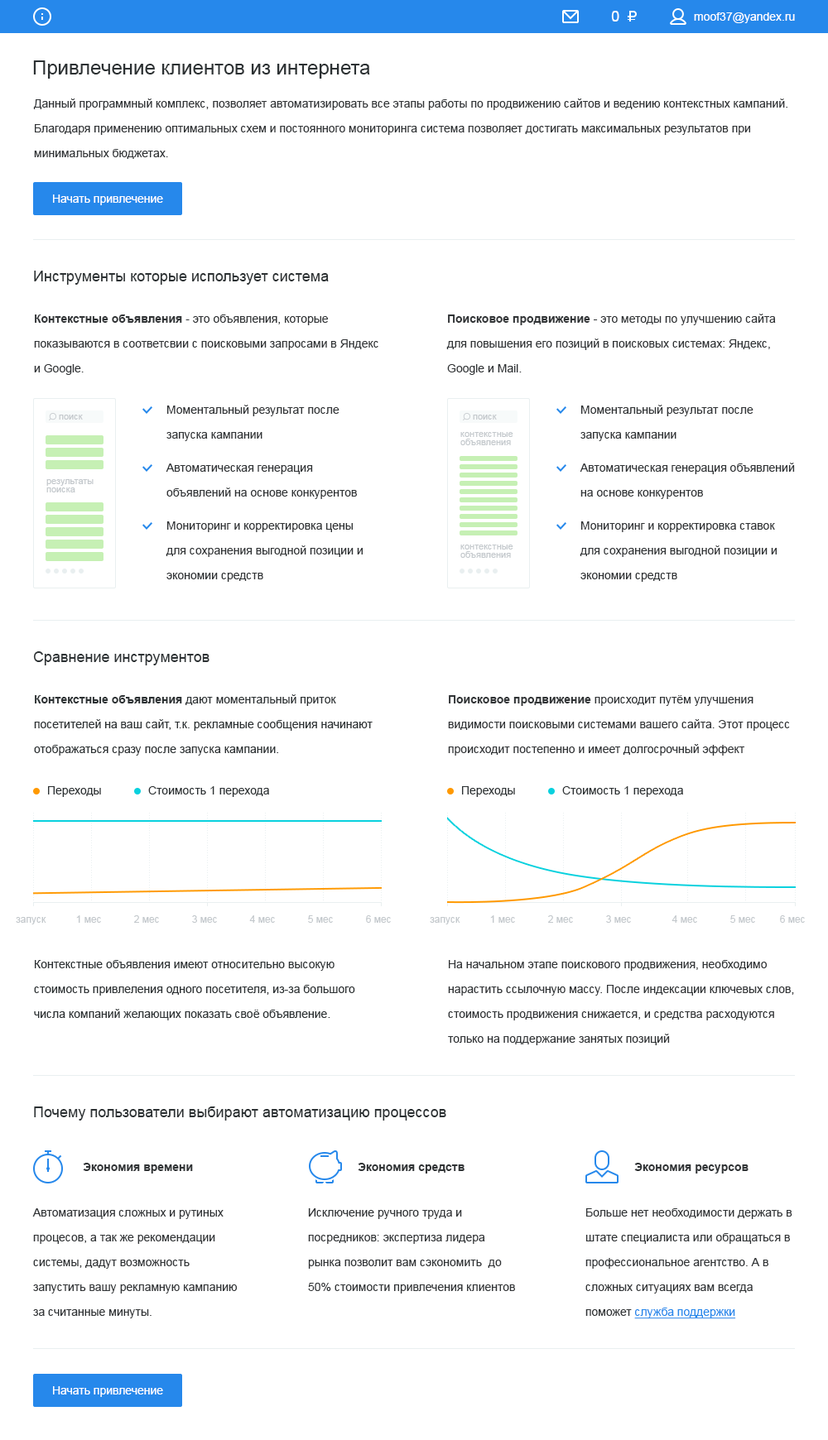
<style>
.page{position:relative;width:828px;height:1440px;background:#ffffff}
.page>*{position:absolute;margin:0}
.t1{font:14.9px "ArialMT";color:#ffffff}
.t2{font:11.6px "ArialMT";color:#ffffff}
.t3{font:19.9px "ArialMT";color:#2c3133}
.t4{font:11.6px/24.8px "ArialMT";color:#313436}
.t5{font:14.9px "ArialMT";color:#2c3133}
.t6{font:11.6px/24.8px "Arial-BoldMT";color:#313436}
.t7{font:9.1px "ArialMT";color:#c3c8cc}
.t8{font:9.1px/8.3px "ArialMT";color:#c3c8cc}
.t9{font:11.6px/24.8px "ArialMT";color:#2c3133}
.t10{font:11.6px/24.8px "Arial-BoldMT";color:#2c3133}
.t11{font:11.6px "ArialMT";color:#2c3133}
.t12{font:9.9px "ArialMT";color:#c3c8cc}
.t13{font:11.6px "Arial-BoldMT";color:#313436}
.t14{font:11.6px/24.8px "ArialMT";color:#2688eb;text-decoration:underline}
</style>
<div class="page">
<p class="t1" style="left:611px;top:11px;width:8px;height:11px">0</p>
<p class="t2" style="left:694px;top:12px;width:101px;height:11px">moof37@yandex.ru</p>
<p class="t3" style="left:33px;top:60px;width:337px;height:19px">Привлечение клиентов из интернета</p>
<p class="t4" style="left:33px;top:99px;width:754px;height:60px">Данный программный комплекс, позволяет автоматизировать все этапы работы по продвижению сайтов и ведению контекстных кампаний.<br>Благодаря применению оптимальных схем и постоянного мониторинга система позволяет достигать максимальных результатов при <br>минимальных бюджетах.</p>
<p class="t2" style="left:53px;top:195px;width:110px;height:10px">Начать привлечение</p>
<p class="t5" style="left:34px;top:271px;width:295px;height:14px">Инструменты которые использует система</p>
<p class="t4" style="left:34px;top:315px;width:344px;height:60px"><span class="t6">Контекстные объявления</span> - это объявления, которые <br>показываются в соответсвии с поисковыми запросами в Яндекс и Google.</p>
<p class="t4" style="left:446px;top:314px;width:330px;height:61px"><span class="t6">Поисковое продвижение</span> - это методы по улучшению сайта для повышения его позиций в поисковых системах: Яндекс, Google и Mail.</p>
<p class="t4" style="left:166px;top:405px;width:173px;height:36px">Моментальный результат после запуска кампании</p>
<p class="t4" style="left:580px;top:405px;width:173px;height:36px">Моментальный результат после <br>запуска кампании</p>
<p class="t7" style="left:59px;top:415px;width:24px;height:5px">поиск</p>
<p class="t7" style="left:473px;top:415px;width:24px;height:5px">поиск</p>
<p class="t8" style="left:460px;top:432px;width:53px;height:13px">контекстные <br>объявления</p>
<p class="t4" style="left:166px;top:464px;width:191px;height:35px">Автоматическая генерация <br>объявлений на основе конкурентов</p>
<p class="t4" style="left:579px;top:463px;width:216px;height:36px">Автоматическая генерация объявлений на основе конкурентов</p>
<p class="t8" style="left:46px;top:479px;width:48px;height:14px">результаты <br>поиска</p>
<p class="t4" style="left:166px;top:522px;width:197px;height:60px">Мониторинг и корректировка цены для сохранения выгодной позиции и экономии средств</p>
<p class="t4" style="left:579px;top:522px;width:198px;height:60px">Мониторинг и корректировка ставок для сохранения выгодной позиции и экономии средств</p>
<p class="t8" style="left:460px;top:545px;width:53px;height:13px">контекстные<br>объявления</p>
<p class="t5" style="left:33px;top:652px;width:176px;height:14px">Сравнение инструментов</p>
<p class="t9" style="left:34px;top:695px;width:339px;height:61px"><span class="t10">Контекстные объявления</span> дают моментальный приток<br>посетителей на ваш сайт, т.к. рекламные сообщения начинают <br>отображаться сразу после запуска кампании.</p>
<p class="t4" style="left:448px;top:695px;width:342px;height:61px"><span class="t6">Поисковое продвижение</span> происходит путём улучшения<br>видимости поисковыми системами вашего сайта. Этот процесс происходит постепенно и имеет долгосрочный эффект</p>
<p class="t11" style="left:48px;top:786px;width:53px;height:11px">Переходы</p>
<p class="t11" style="left:148px;top:786px;width:121px;height:11px">Стоимость 1 перехода</p>
<p class="t11" style="left:462px;top:786px;width:53px;height:11px">Переходы</p>
<p class="t11" style="left:562px;top:786px;width:121px;height:11px">Стоимость 1 перехода</p>
<p class="t12" style="left:16px;top:917px;width:30px;height:8px">запуск</p>
<p class="t12" style="left:76px;top:916px;width:25px;height:7px">1 мес</p>
<p class="t12" style="left:134px;top:916px;width:25px;height:7px">2 мес</p>
<p class="t12" style="left:192px;top:916px;width:25px;height:7px">3 мес</p>
<p class="t12" style="left:249px;top:916px;width:26px;height:7px">4 мес</p>
<p class="t12" style="left:308px;top:916px;width:25px;height:7px">5 мес</p>
<p class="t12" style="left:366px;top:916px;width:25px;height:7px">6 мес</p>
<p class="t12" style="left:430px;top:917px;width:30px;height:8px">запуск</p>
<p class="t12" style="left:490px;top:916px;width:25px;height:7px">1 мес</p>
<p class="t12" style="left:548px;top:916px;width:25px;height:7px">2 мес</p>
<p class="t12" style="left:606px;top:916px;width:25px;height:7px">3 мес</p>
<p class="t12" style="left:671px;top:916px;width:26px;height:7px">4 мес</p>
<p class="t12" style="left:730px;top:916px;width:25px;height:7px">5 мес</p>
<p class="t12" style="left:780px;top:916px;width:25px;height:7px">6 мес</p>
<p class="t9" style="left:34px;top:960px;width:321px;height:61px">Контекстные объявления имеют относительно высокую <br>стоимость привлеления одного посетителя, из-за большого числа компаний желающих показать своё объявление.</p>
<p class="t4" style="left:448px;top:960px;width:346px;height:86px">На начальном этапе поискового продвижения, необходимо нарастить ссылочную массу. После индексации ключевых слов, стоимость продвижения снижается, и средства расходуются только на поддержание занятых позиций</p>
<p class="t5" style="left:34px;top:1107px;width:412px;height:14px">Почему пользователи выбирают автоматизацию процессов</p>
<p class="t13" style="left:83px;top:1163px;width:110px;height:11px">Экономия времени</p>
<p class="t13" style="left:358px;top:1163px;width:106px;height:11px">Экономия средств</p>
<p class="t13" style="left:634px;top:1163px;width:114px;height:11px">Экономия ресурсов</p>
<p class="t4" style="left:32px;top:1209px;width:205px;height:110px">Автоматизация сложных и рутиных<br>процесов, а так же рекомендации <br>системы, дадут возможность <br>запустить вашу рекламную кампанию за считанные минуты.</p>
<p class="t4" style="left:308px;top:1209px;width:207px;height:85px">Исключение ручного труда и <br>посредников: экспертиза лидера рынка позволит вам сэкономить  до 50% стоимости привлечения клиентов</p>
<p class="t4" style="left:585px;top:1209px;width:207px;height:111px">Больше нет необходимости держать в штате специалиста или обращаться в <br>профессиональное агентство. А в <br>сложных ситуациях вам всегда <br>поможет <span class="t14">служба поддержки</span></p>
<p class="t2" style="left:53px;top:1387px;width:110px;height:10px">Начать привлечение</p>
</div>
